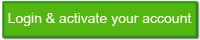
<style>
.page{position:relative;width:200px;height:40px;background:#53b710}
.page>*{position:absolute;margin:0}
.t1{font:14px "ArialMT";color:#ffffff}
</style>
<div class="page">
<p class="t1" style="left:8px;top:13px;width:184px;height:13px">Login &amp; activate your account</p>
</div>
